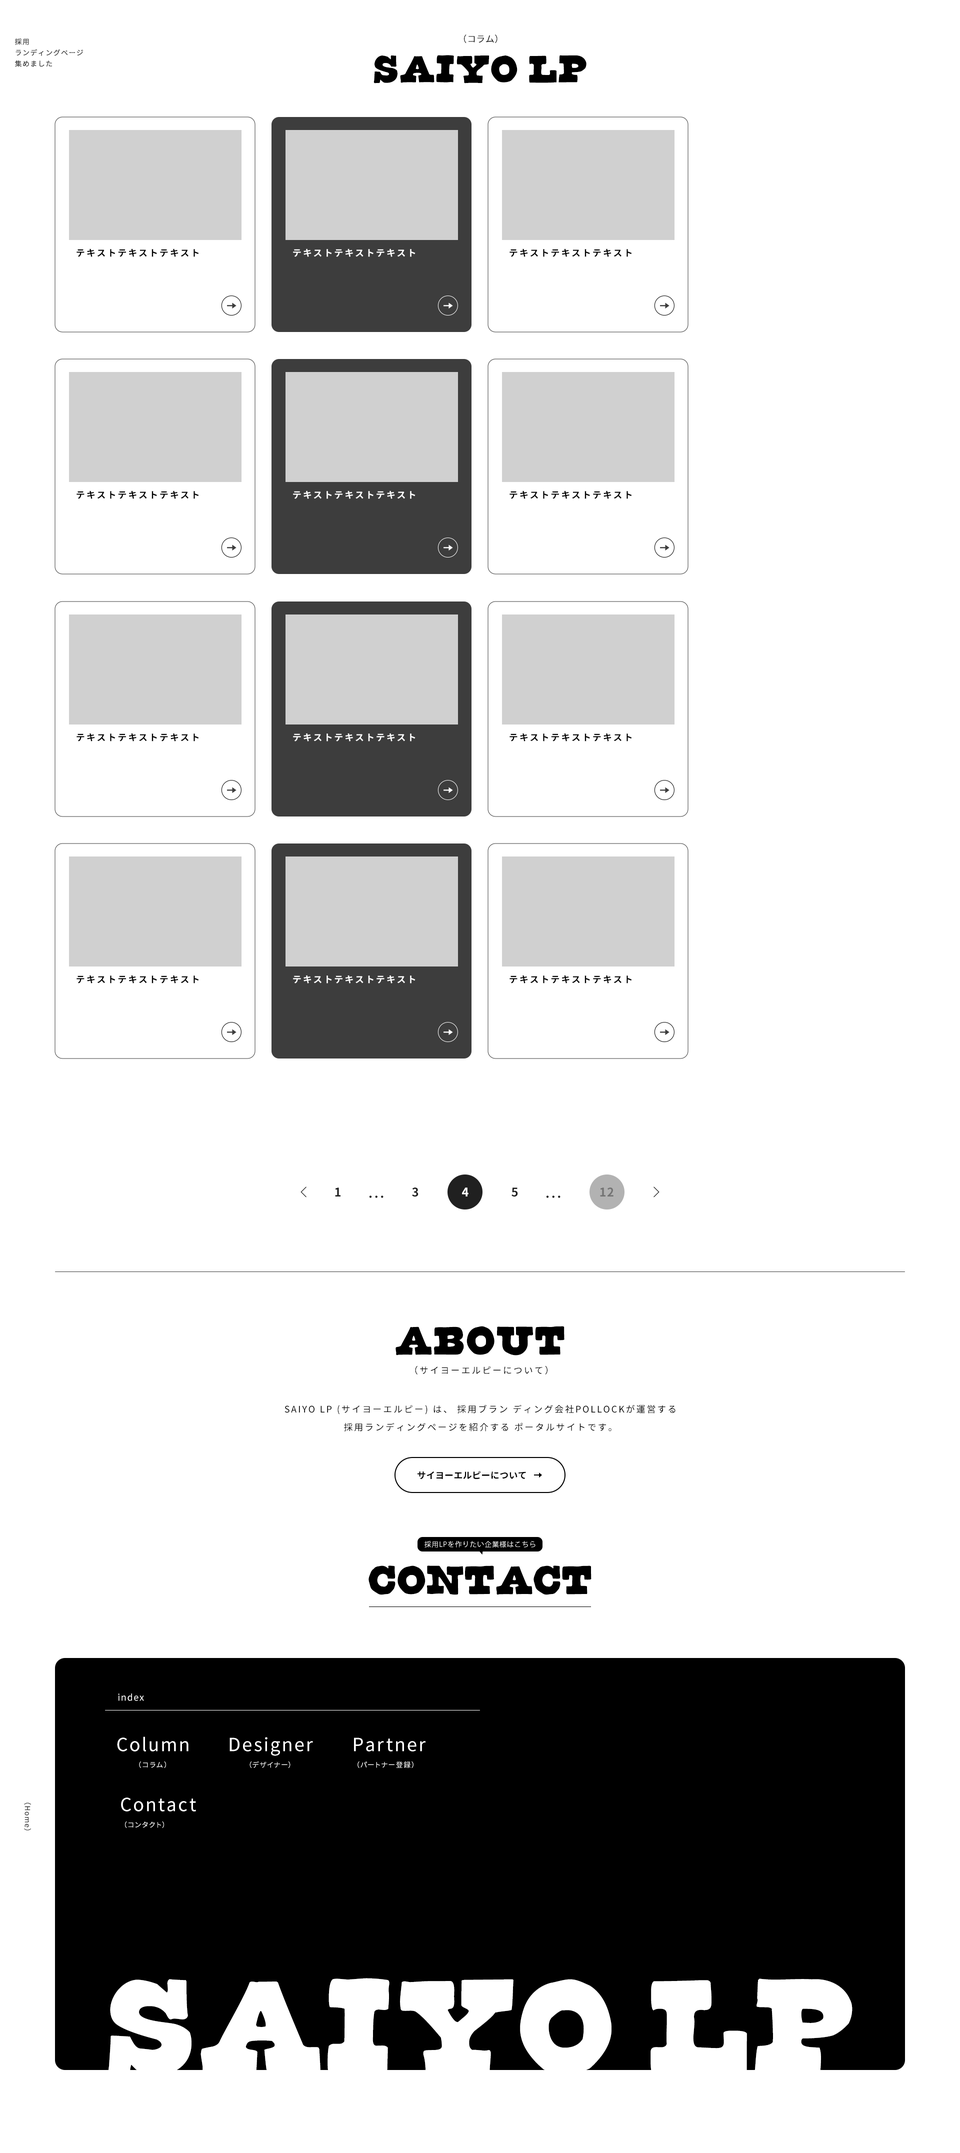
<style>
.page{position:relative;width:960px;height:2153px;background:#ffffff}
.page>*{position:absolute;margin:0}
.t1{font:7px/11px "NotoSansCJKjp-Regular";letter-spacing:0.1em;color:#404040}
.t2{font:9px/13px "NotoSansCJKjp-Regular";letter-spacing:0.02em;color:#000000}
.t3{font:42.5px/13px "CornDog";letter-spacing:0.02em;color:#000000}
.t4{font:42.5px/13px "CornDog";letter-spacing:-0.22em;color:#000000}
.t5{font:9px "NotoSansCJKjp-Bold";letter-spacing:0.16em;color:#000000}
.t6{font:9px "NotoSansCJKjp-Bold";letter-spacing:0.16em;color:#ffffff}
.t7{font:12px "NotoSansCJKjp-Bold";letter-spacing:0.16em;color:#202020}
.t8{font:12px "NotoSansCJKjp-Bold";letter-spacing:0.16em;color:#ffffff}
.t9{font:12px "NotoSansCJKjp-Bold";letter-spacing:0.06em;color:#747474}
.t10{font:9px/48px "NotoSansCJKjp-Regular";letter-spacing:0.16em;color:#000000}
.t11{font:45px/48px "CornDog";letter-spacing:0.02em;color:#000000}
.t12{font:9px/18px "NotoSansCJKjp-Regular";letter-spacing:0.16em;color:#000000}
.t13{font:9px "NotoSansCJKjp-Bold";letter-spacing:0.02em;color:#000000}
.t14{font:7px "KozGoPr6N-Regular";letter-spacing:0.06em;color:#ffffff}
.t15{font:45px "CornDog";color:#000000}
.t16{font:9px "NotoSansCJKjp-Regular";letter-spacing:0.1em;color:#ffffff}
.t17{font:18px/26px "NotoSansCJKjp-Regular";letter-spacing:0.1em;color:#ffffff}
.t18{font:7px/3px "NotoSansCJKjp-Regular";letter-spacing:0.14em;color:#ffffff}
.t19{font:7px/3px "NotoSansCJKjp-Regular";letter-spacing:0.1em;color:#ffffff}
.t20{font:7px "NotoSansCJKjp-Regular";letter-spacing:0.1em;color:#404040}
.t21{font:149.4px "CornDog";letter-spacing:0.02em;color:#ffffff}
.t22{font:149.4px "CornDog";letter-spacing:-0.24em;color:#ffffff}
</style>
<div class="page">
<p class="t1" style="left:15px;top:38px;width:68px;height:29px">採用<br>ランディングページ<br>集めました</p>
<p class="t2" style="left:374px;top:34px;width:212px;height:50px;text-align:center">（コラム）<br><span class="t3">SAIY</span><span class="t4">O</span><span class="t3"> LP</span></p>
<p class="t5" style="left:76px;top:248px;width:123px;height:9px">テキストテキストテキスト</p>
<p class="t6" style="left:293px;top:248px;width:123px;height:9px">テキストテキストテキスト</p>
<p class="t5" style="left:510px;top:248px;width:122px;height:9px">テキストテキストテキスト</p>
<p class="t5" style="left:76px;top:490px;width:123px;height:9px">テキストテキストテキスト</p>
<p class="t6" style="left:293px;top:490px;width:123px;height:9px">テキストテキストテキスト</p>
<p class="t5" style="left:510px;top:490px;width:122px;height:9px">テキストテキストテキスト</p>
<p class="t5" style="left:76px;top:733px;width:123px;height:9px">テキストテキストテキスト</p>
<p class="t6" style="left:293px;top:733px;width:123px;height:9px">テキストテキストテキスト</p>
<p class="t5" style="left:510px;top:733px;width:122px;height:9px">テキストテキストテキスト</p>
<p class="t5" style="left:76px;top:975px;width:123px;height:9px">テキストテキストテキスト</p>
<p class="t6" style="left:293px;top:975px;width:123px;height:9px">テキストテキストテキスト</p>
<p class="t5" style="left:510px;top:975px;width:122px;height:9px">テキストテキストテキスト</p>
<p class="t7" style="left:335px;top:1188px;width:5px;height:8px">1</p>
<p class="t7" style="left:412px;top:1188px;width:6px;height:9px">3</p>
<p class="t8" style="left:462px;top:1188px;width:6px;height:8px">4</p>
<p class="t7" style="left:512px;top:1188px;width:6px;height:9px">5</p>
<p class="t9" style="left:600px;top:1188px;width:14px;height:8px">12</p>
<p class="t7" style="left:369px;top:1196px;width:15px;height:2px">...</p>
<p class="t7" style="left:546px;top:1196px;width:14px;height:2px">...</p>
<p class="t10" style="left:396px;top:1326px;width:168px;height:48px;text-align:center"><span class="t11">ABOUT<br></span>（サイヨーエルピーについて）</p>
<p class="t12" style="left:284px;top:1404px;width:392px;height:28px;text-align:center">SAIYO LP (サイヨーエルピー) は、 採用ブラン ディング会社POLLOCKが運営する<br>採用ランディングページを紹介する ポータルサイトです。</p>
<p class="t13" style="left:418px;top:1471px;width:108px;height:9px">サイヨーエルピーについて</p>
<p class="t14" style="left:424px;top:1540px;width:112px;height:8px">採用LPを作りたい企業様はこちら</p>
<p class="t15" style="left:368px;top:1566px;width:224px;height:29px">CONTACT</p>
<p class="t16" style="left:118px;top:1694px;width:26px;height:7px">index</p>
<p class="t17" style="left:117px;top:1736px;width:71px;height:32px;text-align:center">Column<br><span class="t18">（コラム）</span></p>
<p class="t17" style="left:230px;top:1737px;width:83px;height:31px;text-align:center">Designer<br><span class="t19">（デザイナー）</span></p>
<p class="t19" style="left:354px;top:1738px;width:72px;height:30px;text-align:center"><span class="t17"> Partner<br></span>（パートナー登録）</p>
<p class="t20" style="left:24px;top:1802px;width:7px;height:28px;rotate:90deg">（Home）</p>
<p class="t17" style="left:121px;top:1798px;width:75px;height:30px">Contact<br><span class="t19">（コンタクト）</span></p>
<p class="t21" style="left:108px;top:1978px;width:744px;height:99px">SAIY<span class="t22">O</span> LP</p>
</div>
